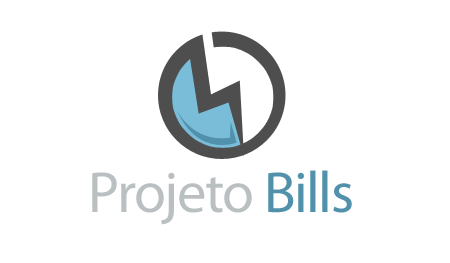
<style>
.page{position:relative;width:450px;height:263px;background:#ffffff}
.page>*{position:absolute;margin:0}
.t1{font:58.3px "MyriadPro-Regular";letter-spacing:-0.025em;color:#bac0c2}
.t2{font:58.3px "MyriadPro-Regular";letter-spacing:-0.025em;color:#5291ab}
</style>
<div class="page">
<p class="t1" style="left:92px;top:170px;width:260px;height:55px">Projeto <span class="t2">Bills</span></p>
</div>
